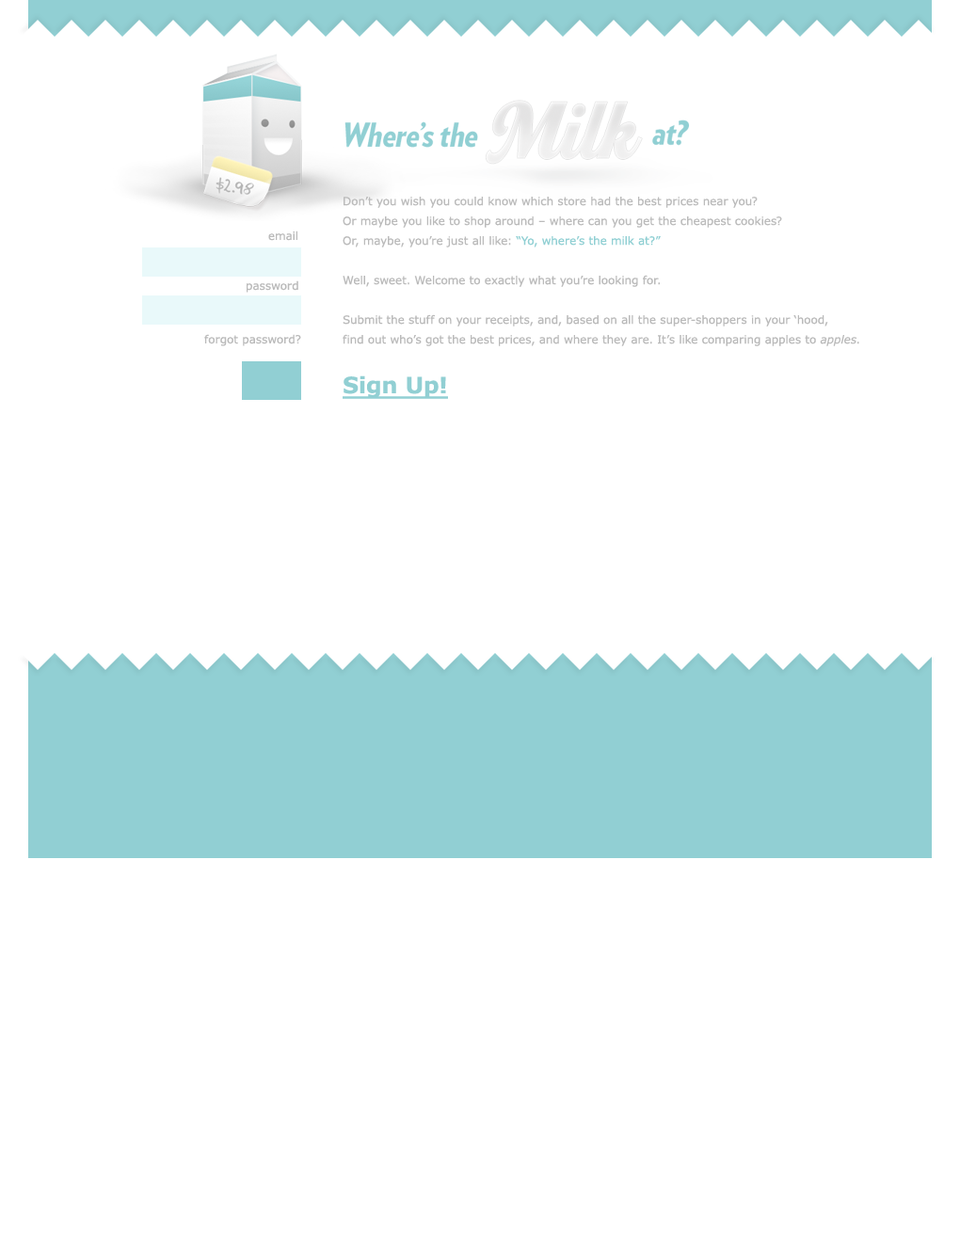
<style>
.page{position:relative;width:960px;height:1242px;background:#ffffff}
.page>*{position:absolute;margin:0}
.t1{font:11.3px/19.8px "Verdana";color:#bababa}
.t2{font:11.3px/19.8px "Verdana";color:#bbbbbb}
.t3{font:11.3px/19.8px "Verdana";color:#90cfd3}
.t4{font:11.3px/19.8px "Verdana-Italic";color:#bababa}
.t5{font:11.3px "Verdana";color:#bababa}
.t6{font:22.6px "Verdana-Bold";color:#91cfd3;text-decoration:underline}
</style>
<div class="page">
<p class="t1" style="left:343px;top:197px;width:516px;height:149px"><span class="t2">Don’t you wish you could know which store had the best prices near you?<br>Or maybe you like to shop around – where can you get the cheapest cookies? <br>Or, maybe, you’re just all like: </span><span class="t3">“Yo, where’s the milk at?”<br><br></span>Well, sweet. Welcome to exactly what you’re looking for.<br><br>Submit the stuff on your receipts, and, based on all the super-shoppers in your ‘hood,<br>find out who’s got the best prices, and where they are. It’s like comparing apples to <span class="t4">apples</span>.</p>
<p class="t5" style="left:268px;top:231px;width:29px;height:10px">email</p>
<p class="t5" style="left:247px;top:280px;width:51px;height:13px">password</p>
<p class="t5" style="left:204px;top:334px;width:97px;height:12px">forgot password?</p>
<p class="t6" style="left:343px;top:375px;width:105px;height:24px">Sign Up!</p>
</div>
